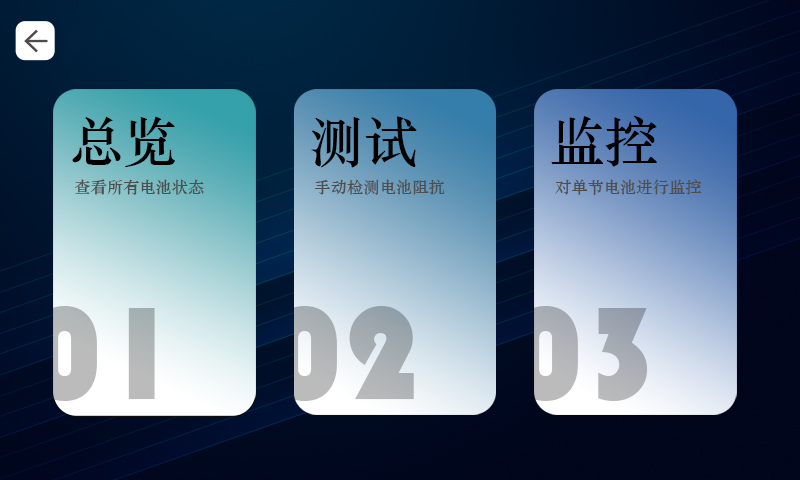
<style>
.page{position:relative;width:800px;height:480px}
.page>*{position:absolute;margin:0}
.t1{font:54.2px "STZhongsong";color:#000000}
.t2{font:16.3px "STZhongsong";color:#4f4f4f}
.t3{font:135.6px "Bauhaus93";color:#b5b8b8}
.t4{font:135.6px "Bauhaus93";color:#a9afb3}
.t5{font:135.6px "Bauhaus93";color:#a9aeb4}
</style>
<div class="page">
<p class="t1" style="left:72px;top:116px;width:103px;height:51px">总览</p>
<p class="t1" style="left:311px;top:116px;width:106px;height:52px">测试</p>
<p class="t1" style="left:551px;top:115px;width:106px;height:52px">监控</p>
<p class="t2" style="left:74px;top:179px;width:130px;height:16px">查看所有电池状态</p>
<p class="t2" style="left:315px;top:179px;width:130px;height:16px">手动检测电池阻抗</p>
<p class="t2" style="left:555px;top:179px;width:147px;height:16px">对单节电池进行监控</p>
<p class="t3" style="left:32px;top:306px;width:123px;height:95px">01</p>
<p class="t4" style="left:272px;top:306px;width:142px;height:95px">02</p>
<p class="t5" style="left:513px;top:306px;width:135px;height:95px">03</p>
</div>
